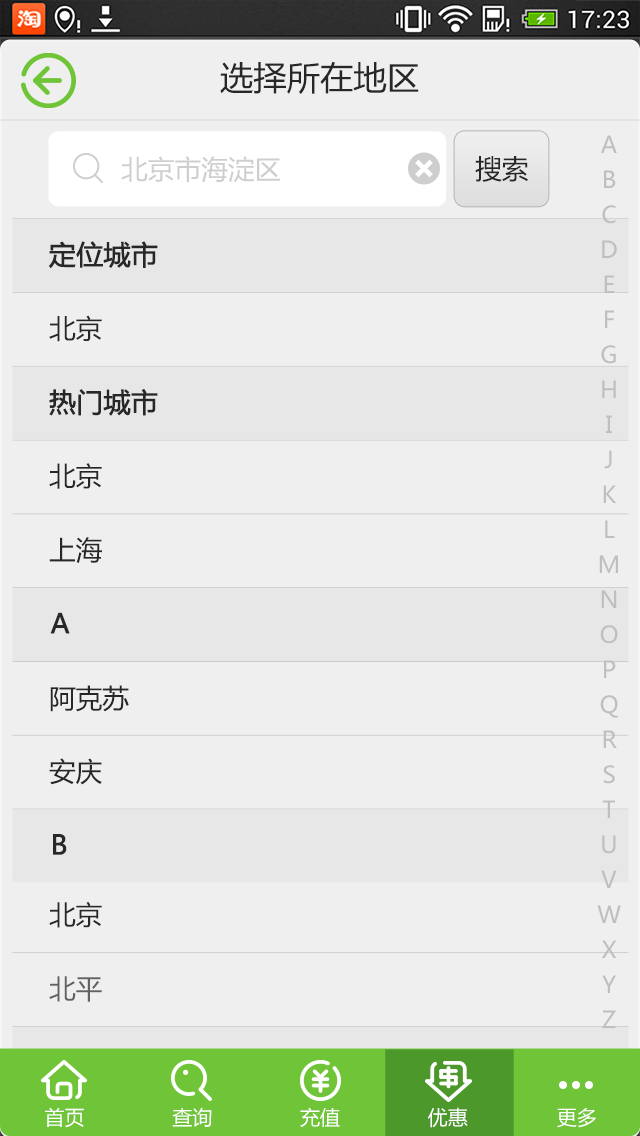
<style>
.page{position:relative;width:640px;height:1136px;background:#efefef}
.page>*{position:absolute;margin:0}
.t1{font:33.3px "MicrosoftYaHei";color:#272727}
.t2{font:23.3px/35px "MicrosoftYaHei";color:#bfbfbf}
.t3{font:26.7px "MicrosoftYaHei";color:#cecece}
.t4{font:26.7px "MicrosoftYaHei";color:#272727}
.t5{font:26.7px "MicrosoftYaHei";color:#272727;font-weight:bold}
.t6{font:26.7px "MicrosoftYaHei";color:#626262}
.t7{font:20px "MicrosoftYaHei";color:#ffffff}
</style>
<div class="page">
<p class="t1" style="left:220px;top:61px;width:199px;height:33px">选择所在地区</p>
<p class="t2" style="left:597px;top:135px;width:24px;height:893px;text-align:center">A<br>B<br>C<br>D<br>E<br>F<br>G<br>H<br>I<br>J<br>K<br>L<br>M<br>N<br>O<br>P<br>Q<br>R<br>S<br>T<br>U<br>V<br>W<br>X<br>Y<br>Z</p>
<p class="t3" style="left:121px;top:156px;width:159px;height:27px">北京市海淀区</p>
<p class="t4" style="left:475px;top:156px;width:53px;height:26px">搜索</p>
<p class="t5" style="left:48px;top:241px;width:110px;height:27px">定位城市</p>
<p class="t4" style="left:49px;top:315px;width:53px;height:27px">北京</p>
<p class="t5" style="left:49px;top:389px;width:109px;height:27px">热门城市</p>
<p class="t4" style="left:49px;top:463px;width:53px;height:26px">北京</p>
<p class="t4" style="left:49px;top:537px;width:53px;height:26px">上海</p>
<p class="t5" style="left:50px;top:612px;width:20px;height:22px">A</p>
<p class="t4" style="left:50px;top:685px;width:79px;height:27px">阿克苏</p>
<p class="t4" style="left:49px;top:758px;width:53px;height:27px">安庆</p>
<p class="t5" style="left:53px;top:834px;width:14px;height:21px">B</p>
<p class="t4" style="left:49px;top:901px;width:53px;height:27px">北京</p>
<p class="t6" style="left:49px;top:976px;width:53px;height:26px">北平</p>
<p class="t7" style="left:45px;top:1107px;width:39px;height:21px">首页</p>
<p class="t7" style="left:172px;top:1107px;width:40px;height:20px">查询</p>
<p class="t7" style="left:300px;top:1107px;width:40px;height:20px">充值</p>
<p class="t7" style="left:428px;top:1107px;width:40px;height:21px">优惠</p>
<p class="t7" style="left:557px;top:1108px;width:39px;height:20px">更多</p>
</div>
